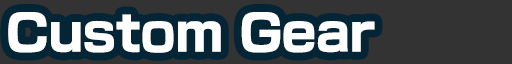
<style>
.page{position:relative;width:512px;height:64px;background:#333333}
.page>*{position:absolute;margin:0}
.t1{font:48px "NewRodinPro-EB";color:#ffffff}
</style>
<div class="page">
<p class="t1" style="left:8px;top:12px;width:367px;height:41px">Custom Gear</p>
</div>
